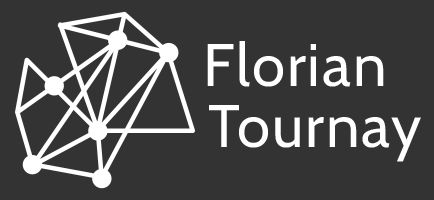
<style>
.page{position:relative;width:434px;height:200px;background:#333333}
.page>*{position:absolute;margin:0}
.t1{font:60px "Cabin-Regular";letter-spacing:0.03em;color:#ffffff}
</style>
<div class="page">
<p class="t1" style="left:207px;top:41px;width:177px;height:46px">Florian</p>
<p class="t1" style="left:209px;top:105px;width:212px;height:57px">Tournay</p>
</div>
